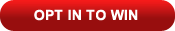
<style>
.page{position:relative;width:175px;height:31px;background:#980e0e}
.page>*{position:absolute;margin:0}
.t1{font:14px "Arial-BoldMT";letter-spacing:0.014em;color:#ffffff}
</style>
<div class="page">
<p class="t1" style="left:34px;top:9px;width:104px;height:12px">OPT IN TO WIN</p>
</div>
